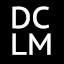
<style>
.page{position:relative;width:64px;height:64px;background:#000000}
.page>*{position:absolute;margin:0}
.t1{font:30px/26.7px "PTSans-Caption";color:#ffffff}
</style>
<div class="page">
<p class="t1" style="left:12px;top:6px;width:39px;height:49px">DC<br>LM</p>
</div>
